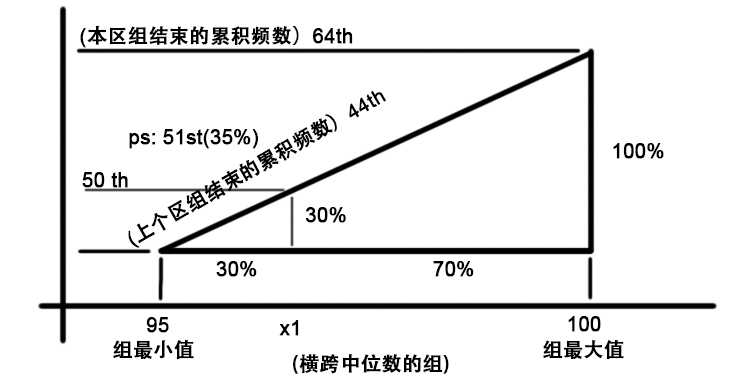
<style>
.page{position:relative;width:730px;height:389px;background:#ffffff}
.page>*{position:absolute;margin:0}
.t1{font:20px "AdobeHeitiStd-Regular";color:#000000;font-weight:bold}
.t2{font:20px "ArialMT";color:#000000;font-weight:bold}
</style>
<div class="page">
<p class="t1" style="left:80px;top:25px;width:273px;height:23px"><span class="t2">(</span>本区组结束的累积频数）<span class="t2">64th</span></p>
<p class="t1" style="left:128px;top:91px;width:258px;height:157px;rotate:-30deg"><span class="t2">(</span>上个区组结束的累积频数）<span class="t2">44th</span></p>
<p class="t2" style="left:129px;top:129px;width:129px;height:20px">ps: 51st(35%)</p>
<p class="t2" style="left:613px;top:143px;width:51px;height:16px">100%</p>
<p class="t2" style="left:82px;top:172px;width:46px;height:16px">50 th</p>
<p class="t2" style="left:305px;top:207px;width:41px;height:16px">30%</p>
<p class="t2" style="left:216px;top:261px;width:41px;height:16px">30%</p>
<p class="t2" style="left:433px;top:261px;width:41px;height:16px">70%</p>
<p class="t2" style="left:146px;top:317px;width:23px;height:16px">95</p>
<p class="t2" style="left:568px;top:316px;width:33px;height:16px">100</p>
<p class="t2" style="left:279px;top:320px;width:20px;height:16px">x1</p>
<p class="t1" style="left:113px;top:340px;width:81px;height:20px">组最小值</p>
<p class="t1" style="left:543px;top:340px;width:81px;height:20px">组最大值</p>
<p class="t1" style="left:293px;top:354px;width:156px;height:20px">(横跨中位数的组)</p>
</div>
